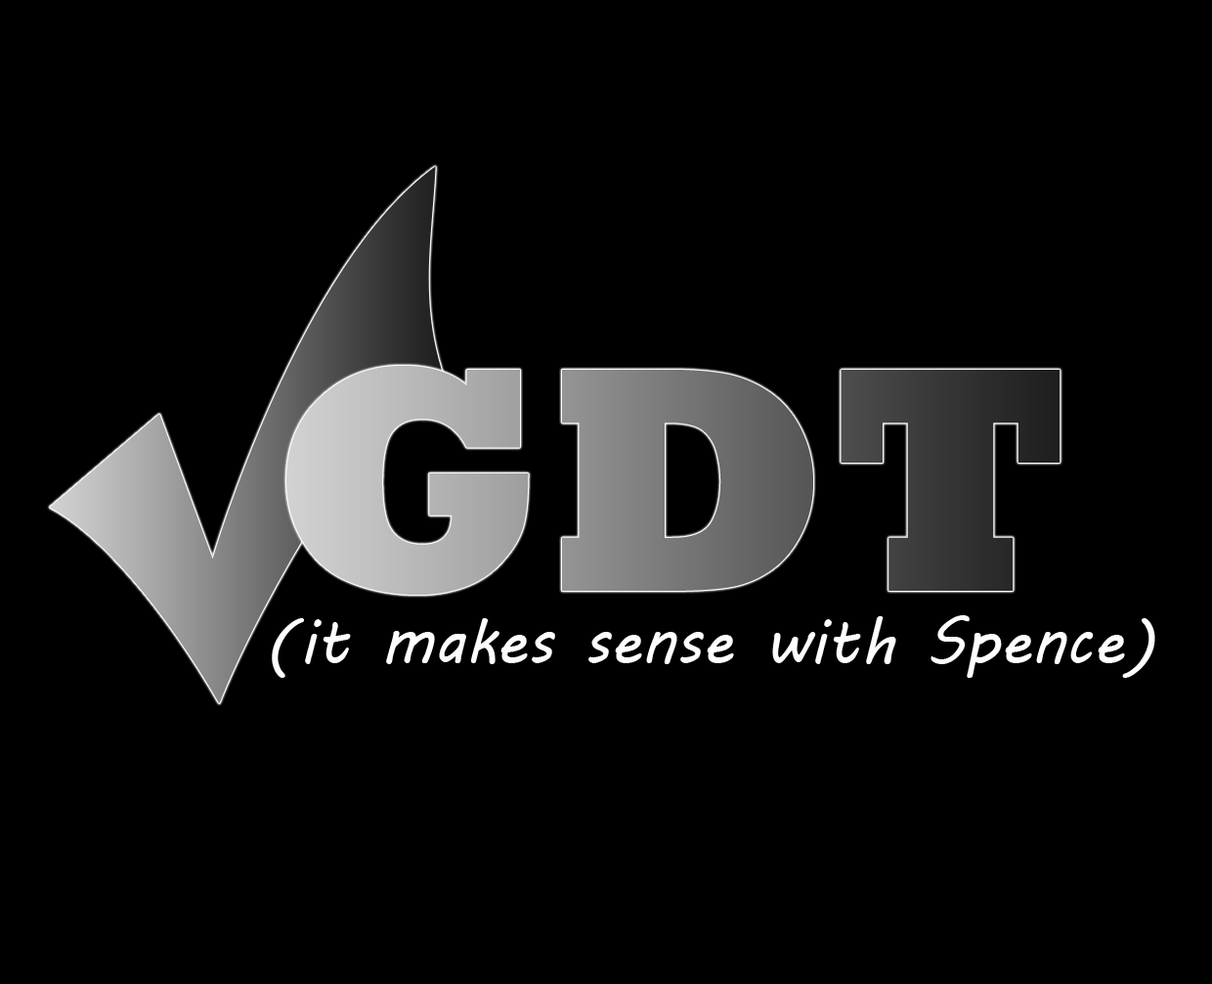
<style>
.page{position:relative;width:1212px;height:984px;background:#000000}
.page>*{position:absolute;margin:0}
.t1{font:325px "Rockwell-ExtraBold"}
.t2{font:63.2px "MVBoli";color:#fefefe}
</style>
<div class="page">
<p class="t1" style="left:286px;top:366px;width:775px;height:228px">GDT</p>
<p class="t2" style="left:272px;top:615px;width:884px;height:63px">(it makes sense with Spence)</p>
</div>
